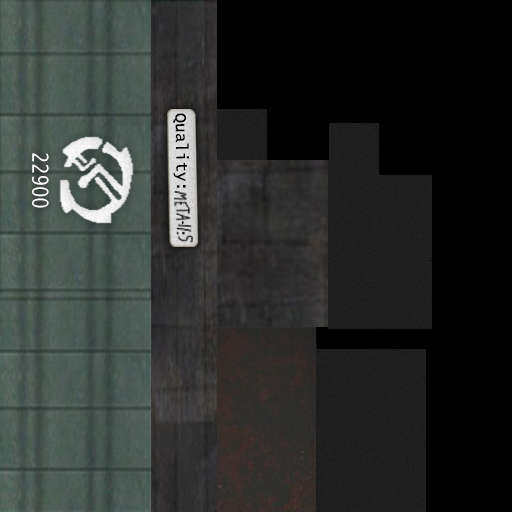
<style>
.page{position:relative;width:512px;height:512px;background:#000000}
.page>*{position:absolute;margin:0}
.t1{font:16.2px "LucidaConsole";color:#000000}
.t2{font:16.2px "LucidaConsole";letter-spacing:-0.2em;color:#000000}
.t3{font:22px "LucidaSansUnicode";color:#ffffff;scale:0.82 1}
</style>
<div class="page">
<p class="t1" style="left:173px;top:113px;width:16px;height:75px;rotate:89deg">Quality<span class="t2">:</span></p>
<p class="t3" style="left:32px;top:153px;width:17px;height:55px;rotate:90deg">22900</p>
</div>
